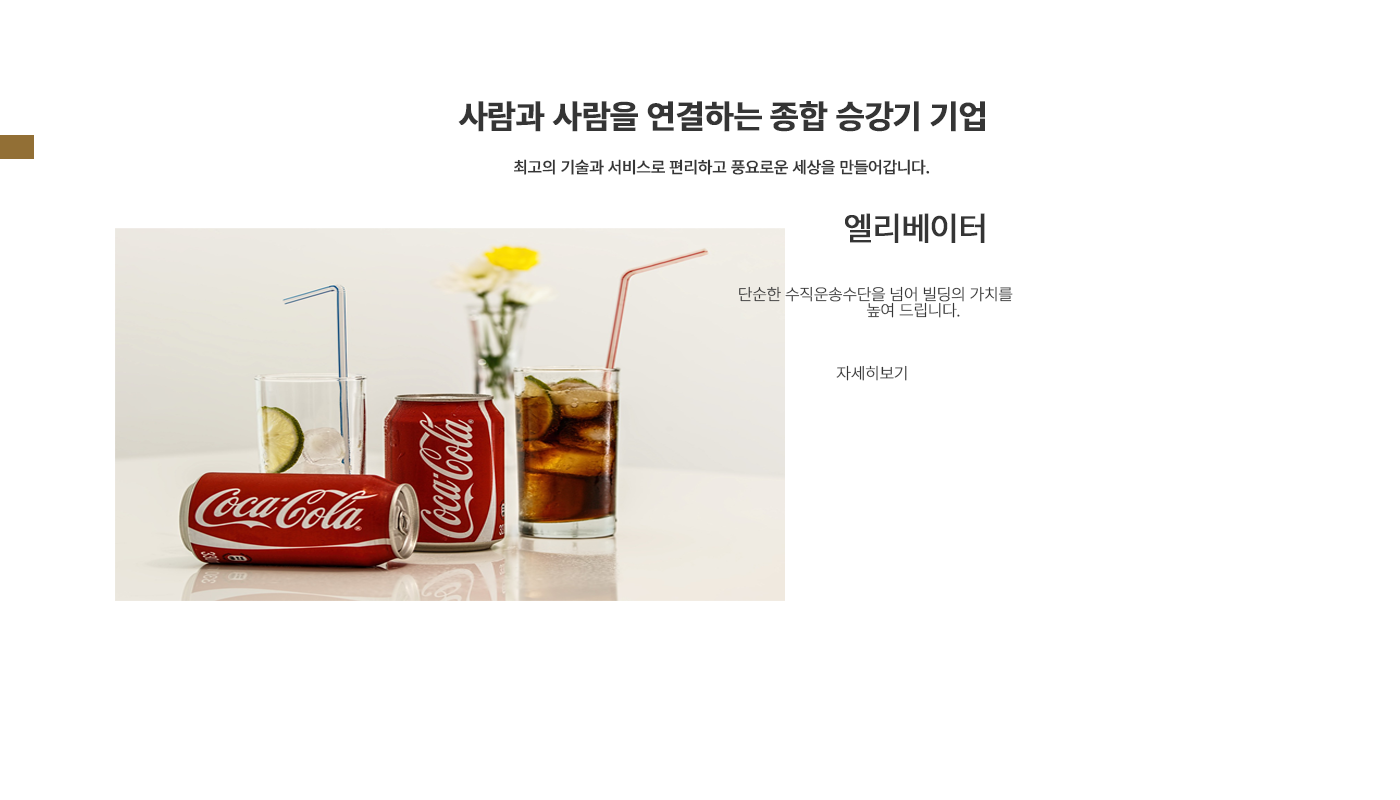
<style>
.page{position:relative;width:1400px;height:800px;background:#ffffff}
.page>*{position:absolute;margin:0}
.t1{font:32px "NotoSansKR-SemiBold";letter-spacing:-0.05em;color:#353535;text-transform:uppercase;font-weight:bold}
.t2{font:16px "NotoSansKR-Regular";letter-spacing:-0.05em;color:#353535;text-transform:uppercase;font-weight:bold}
.t3{font:32px "NotoSansKR-Regular";letter-spacing:-0.05em;color:#353535;text-transform:uppercase;font-weight:bold}
.t4{font:16px/16px "NotoSansKR-Thin";letter-spacing:-0.05em;color:#353535;text-transform:uppercase;font-weight:bold}
.t5{font:16px "NotoSansKR-Thin";letter-spacing:-0.05em;color:#353535;text-transform:uppercase;font-weight:bold}
</style>
<div class="page">
<p class="t1" style="left:458px;top:101px;width:527px;height:31px">사람과 사람을 연결하는 종합 승강기 기업</p>
<p class="t2" style="left:514px;top:159px;width:416px;height:16px">최고의 기술과 서비스로 편리하고 풍요로운 세상을 만들어갑니다.</p>
<p class="t3" style="left:845px;top:213px;width:140px;height:30px">엘리베이터</p>
<p class="t4" style="left:739px;top:286px;width:274px;height:32px;text-align:center">단순한 수직운송수단을 넘어 빌딩의 가치를<br>                        높여 드립니다.</p>
<p class="t5" style="left:836px;top:365px;width:71px;height:16px">자세히보기</p>
</div>
